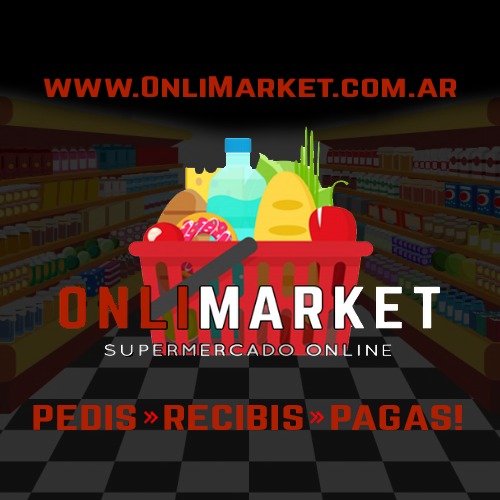
<style>
.page{position:relative;width:500px;height:500px}
.page>*{position:absolute;margin:0}
.t1{font:26px "Norwester-Regular";color:#b01f00;scale:1.54 1}
.t2{font:31.2px "Norwester-Regular";color:#b01f00;scale:1.54 1}
</style>
<div class="page">
<p class="t1" style="left:44px;top:76px;width:412px;height:21px">www.OnliMarket.com.ar</p>
<p class="t2" style="left:33px;top:405px;width:429px;height:25px">PEDIS  RECIBIS  PAGAS!</p>
</div>
